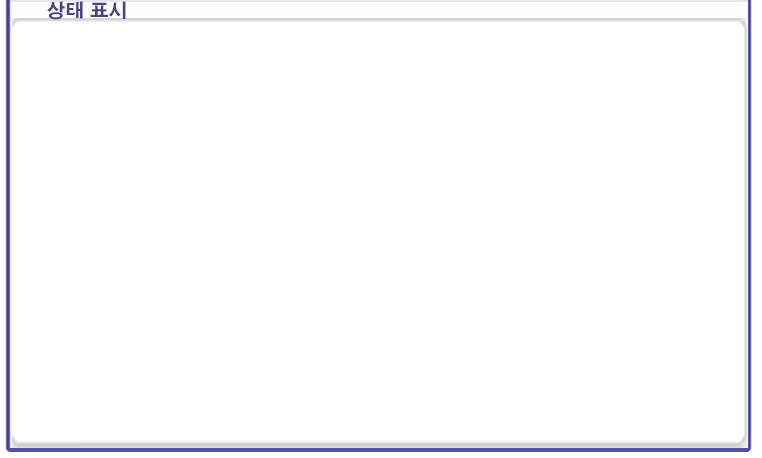
<style>
.page{position:relative;width:762px;height:458px;background:#ffffff}
.page>*{position:absolute;margin:0}
.t1{font:18.7px "H2gtrE";color:#4d4185}
</style>
<div class="page">
<p class="t1" style="left:47px;top:1px;width:79px;height:19px">상태 표시</p>
</div>
